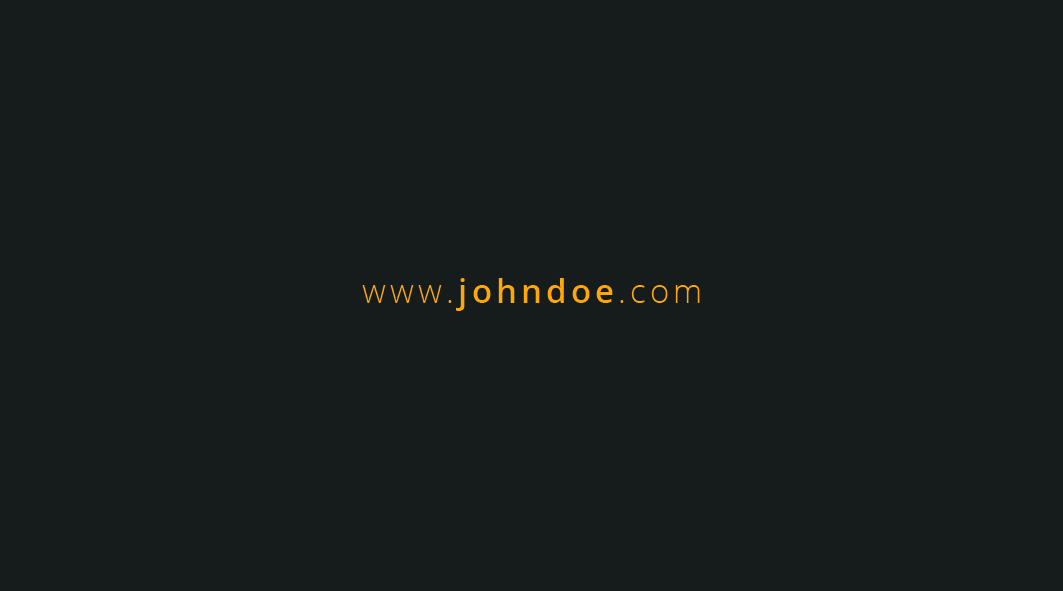
<style>
.page{position:relative;width:1063px;height:591px;background:#161b1b}
.page>*{position:absolute;margin:0}
.t1{font:33.3px "OpenSans-Semibold";letter-spacing:0.118em;color:#ffa608}
.t2{font:33.3px "OpenSans-Light";letter-spacing:0.118em;color:#ffa608}
</style>
<div class="page">
<p class="t1" style="left:362px;top:278px;width:338px;height:33px"><span class="t2">www.</span>johndoe<span class="t2">.com</span></p>
</div>
